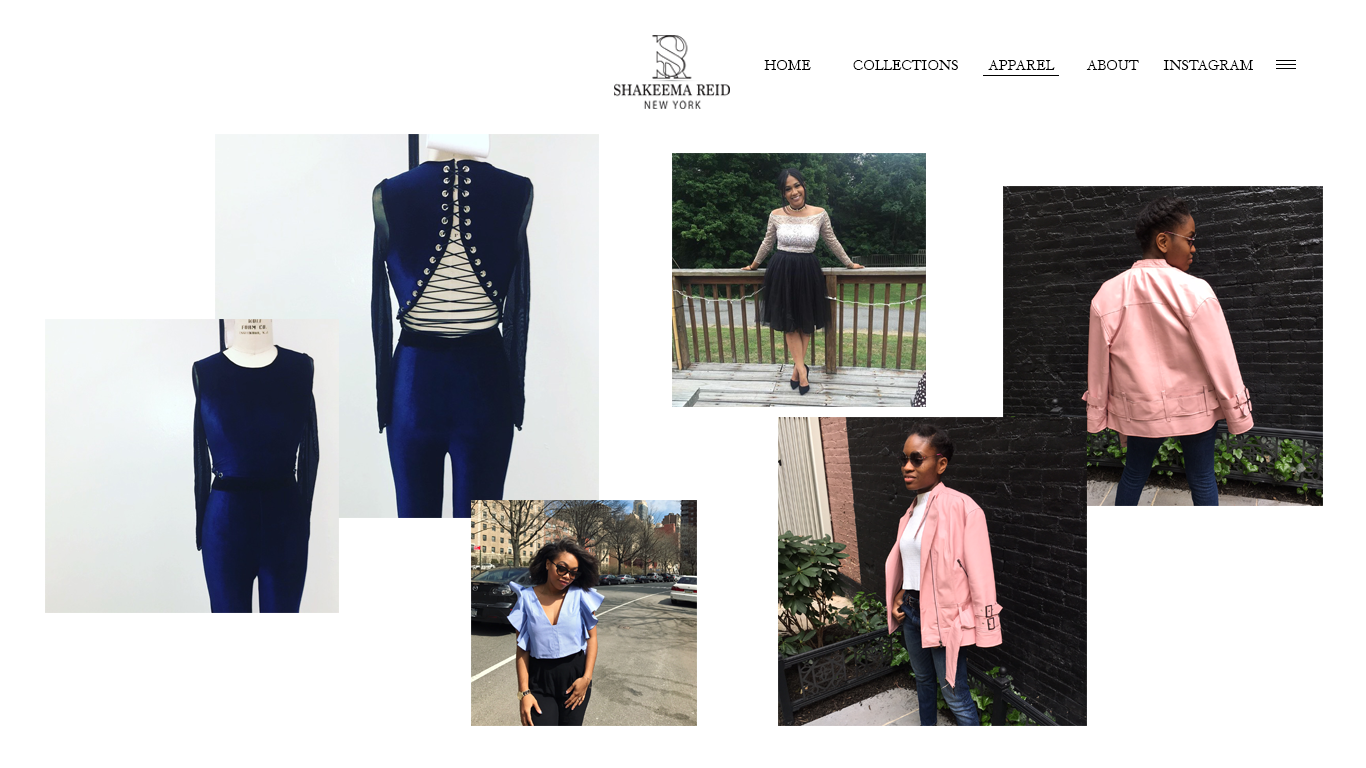
<style>
.page{position:relative;width:1366px;height:768px;background:#ffffff}
.page>*{position:absolute;margin:0}
.t1{font:14px "HoeflerText-Regular";color:#000000}
</style>
<div class="page">
<p class="t1" style="left:764px;top:60px;width:47px;height:10px">HOME</p>
<p class="t1" style="left:853px;top:60px;width:105px;height:10px">COLLECTIONS</p>
<p class="t1" style="left:988px;top:60px;width:67px;height:10px">APPAREL</p>
<p class="t1" style="left:1086px;top:60px;width:53px;height:10px">ABOUT</p>
<p class="t1" style="left:1163px;top:60px;width:90px;height:10px">INSTAGRAM</p>
</div>
